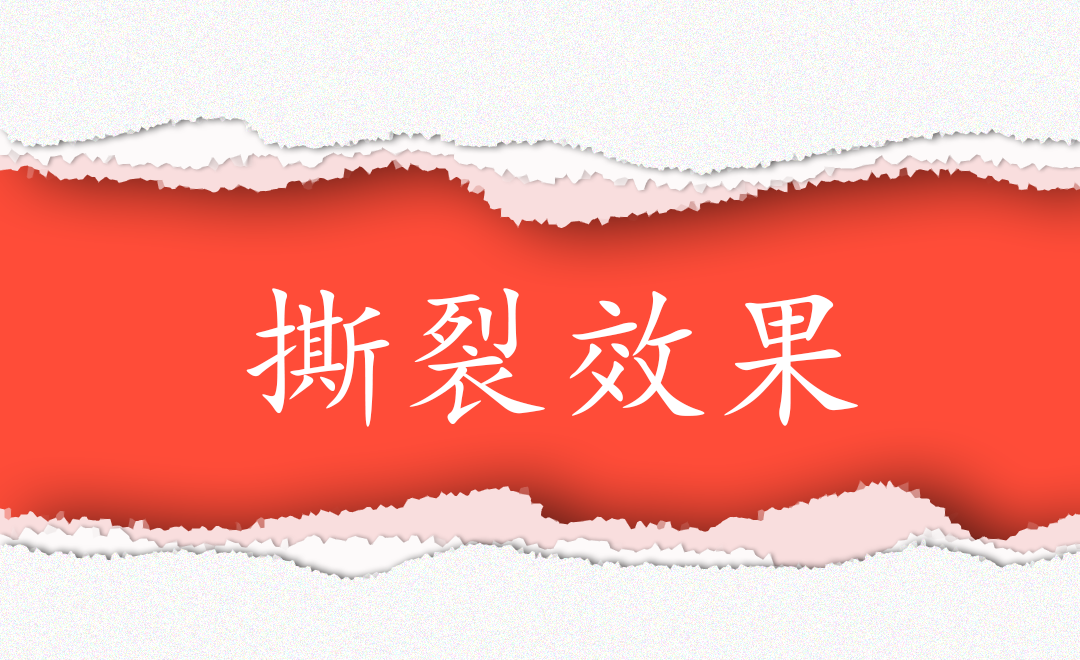
<style>
.page{position:relative;width:1080px;height:660px;background:#ff4c38}
.page>*{position:absolute;margin:0}
.t1{font:156.4px "KaiTi";color:#ffffff}
</style>
<div class="page">
<p class="t1" style="left:246px;top:288px;width:612px;height:139px">撕裂效果</p>
</div>
